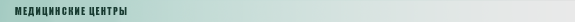
<style>
.page{position:relative;width:575px;height:22px}
.page>*{position:absolute;margin:0}
.t1{font:10px "Impact";letter-spacing:0.1em;color:#183b31}
</style>
<div class="page">
<p class="t1" style="left:15px;top:7px;width:112px;height:10px">МЕДИЦИНСКИЕ ЦЕНТРЫ</p>
</div>
